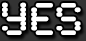
<style>
.page{position:relative;width:86px;height:41px;background:#ffffff}
.page>*{position:absolute;margin:0}
.t1{font:48px "SynchroLET";color:#ffffff}
</style>
<div class="page">
<p class="t1" style="left:2px;top:2px;width:79px;height:33px">YES</p>
</div>
